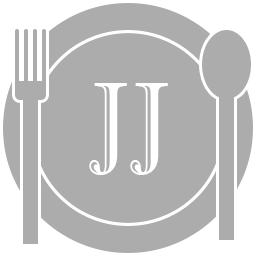
<style>
.page{position:relative;width:256px;height:256px;background:#acacac}
.page>*{position:absolute;margin:0}
.t1{font:98.8px "ImprintMT-Shadow";color:#ffffff}
</style>
<div class="page">
<p class="t1" style="left:89px;top:83px;width:79px;height:92px">JJ</p>
</div>
